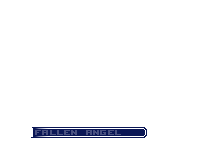
<style>
.page{position:relative;width:200px;height:144px;background:#ffffff}
.page>*{position:absolute;margin:0}
.t1{font:13px "AcknowledgeTT-BRK-";letter-spacing:0.02em;color:#495080}
</style>
<div class="page">
<p class="t1" style="left:35px;top:130px;width:86px;height:5px">FALLEN ANGEL</p>
</div>
